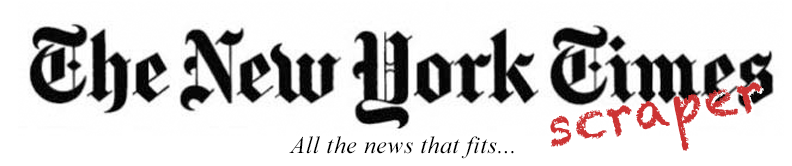
<style>
.page{position:relative;width:792px;height:166px;background:#ffffff}
.page>*{position:absolute;margin:0}
.t1{font:51.9px "Chalkduster";letter-spacing:0.02em;color:#cc3333}
.t2{font:24px "TimesNewRomanPS-ItalicMT";letter-spacing:0.02em;color:#000000}
</style>
<div class="page">
<p class="t1" style="left:550px;top:82px;width:212px;height:69px;rotate:-10deg">scraper</p>
<p class="t2" style="left:289px;top:136px;width:225px;height:23px">All the news that fits...</p>
</div>
